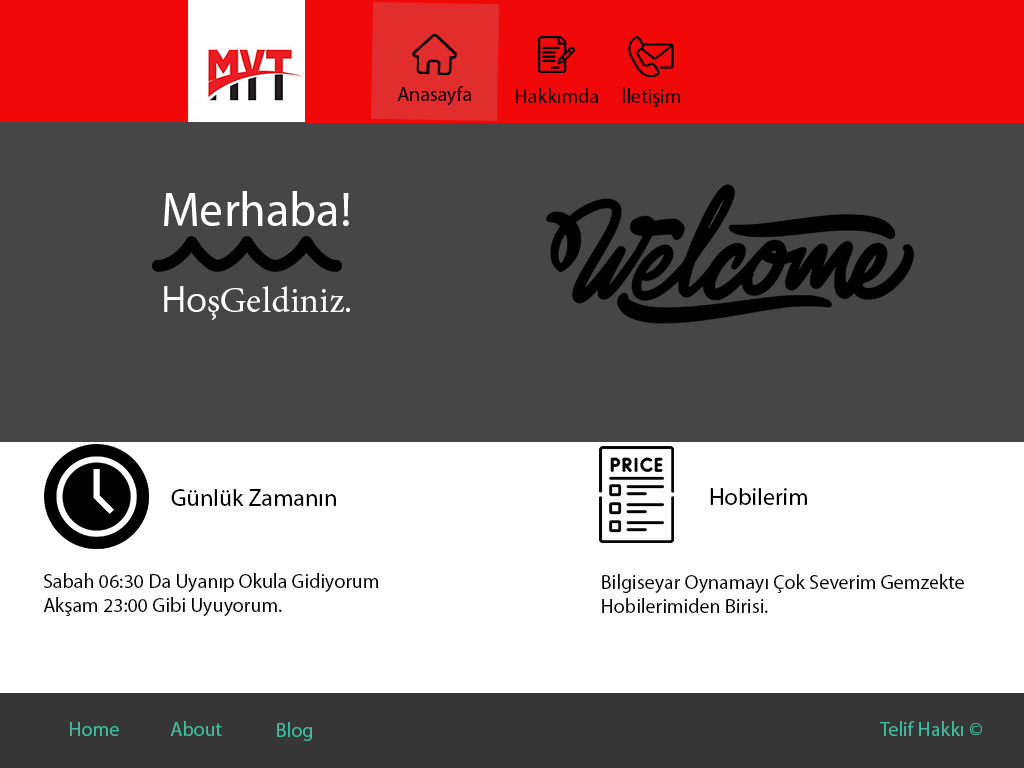
<style>
.page{position:relative;width:1024px;height:768px;background:#464646}
.page>*{position:absolute;margin:0}
.t1{font:20px "MyriadPro-Regular";color:#010101}
.t2{font:20px "MyriadPro-Regular";color:#000000}
.t3{font:36px "MinionPro-Regular";color:#ffffff}
.t4{font:48px "MyriadPro-Regular";color:#ffffff}
.t5{font:36px "MicrosoftNewTaiLue";color:#ffffff}
.t6{font:24px "MyriadPro-Regular";color:#000000}
.t7{font:20px "MyriadPro-Regular";color:#42bc9e}
</style>
<div class="page">
<p class="t1" style="left:397px;top:86px;width:74px;height:19px">Anasayfa</p>
<p class="t2" style="left:516px;top:88px;width:82px;height:15px">Hakkımda</p>
<p class="t2" style="left:623px;top:87px;width:57px;height:20px">İletişim</p>
<p class="t3" style="left:164px;top:191px;width:186px;height:129px"><span class="t4">Merhaba!<br></span><span class="t5"><br>Ho</span>şGeldiniz.</p>
<p class="t6" style="left:171px;top:489px;width:165px;height:17px">Günlük Zamanın</p>
<p class="t6" style="left:710px;top:488px;width:97px;height:17px">Hobilerim</p>
<p class="t2" style="left:43px;top:573px;width:335px;height:43px">Sabah 06:30 Da Uyanıp Okula Gidiyorum<br>Akşam 23:00 Gibi Uyuyorum.</p>
<p class="t2" style="left:602px;top:574px;width:362px;height:39px">Bilgiseyar Oynamayı Çok Severim Gemzekte<br>Hobilerimiden Birisi.</p>
<p class="t7" style="left:70px;top:722px;width:49px;height:14px">Home</p>
<p class="t7" style="left:170px;top:721px;width:52px;height:15px">About</p>
<p class="t7" style="left:277px;top:722px;width:35px;height:19px">Blog</p>
<p class="t7" style="left:880px;top:721px;width:102px;height:15px">Telif Hakkı ©</p>
</div>
